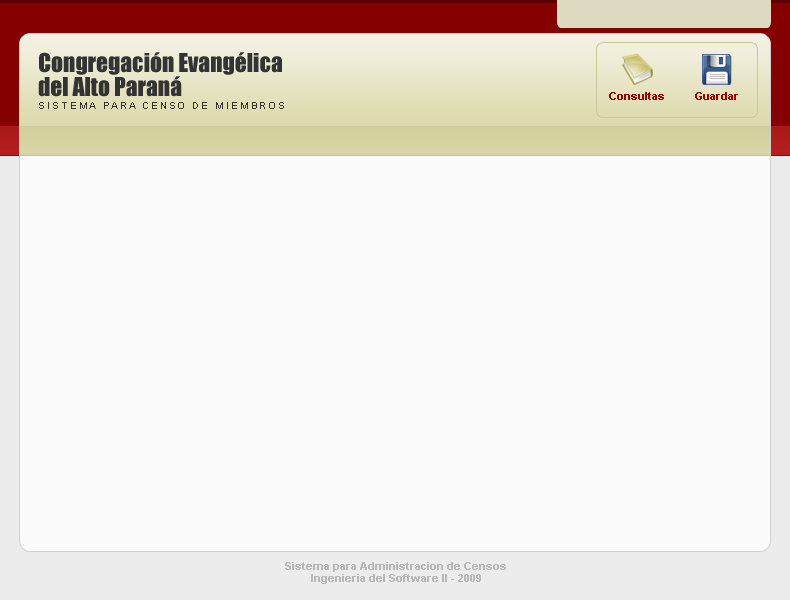
<style>
.page{position:relative;width:790px;height:600px;background:#fbfbfb}
.page>*{position:absolute;margin:0}
.t1{font:24px/24px "Impact";letter-spacing:-0.01em;color:#333333}
.t2{font:10px "ArialMT";letter-spacing:0.19em;color:#333333;text-transform:uppercase}
.t3{font:11px "Arial-BoldMT";color:#980001}
.t4{font:11px/12px "Arial-BoldMT";color:#b8b7b7}
</style>
<div class="page">
<p class="t1" style="left:38px;top:52px;width:244px;height:45px">Congregación Evangélica <br>del Alto Paraná</p>
<p class="t2" style="left:39px;top:102px;width:245px;height:7px">Sistema para Censo de Miembros</p>
<p class="t3" style="left:609px;top:92px;width:55px;height:8px">Consultas</p>
<p class="t3" style="left:695px;top:92px;width:43px;height:8px">Guardar</p>
<p class="t4" style="left:285px;top:562px;width:221px;height:22px;text-align:center">Sistema para Administracion de Censos<br>Ingenieria del Software II - 2009</p>
</div>
